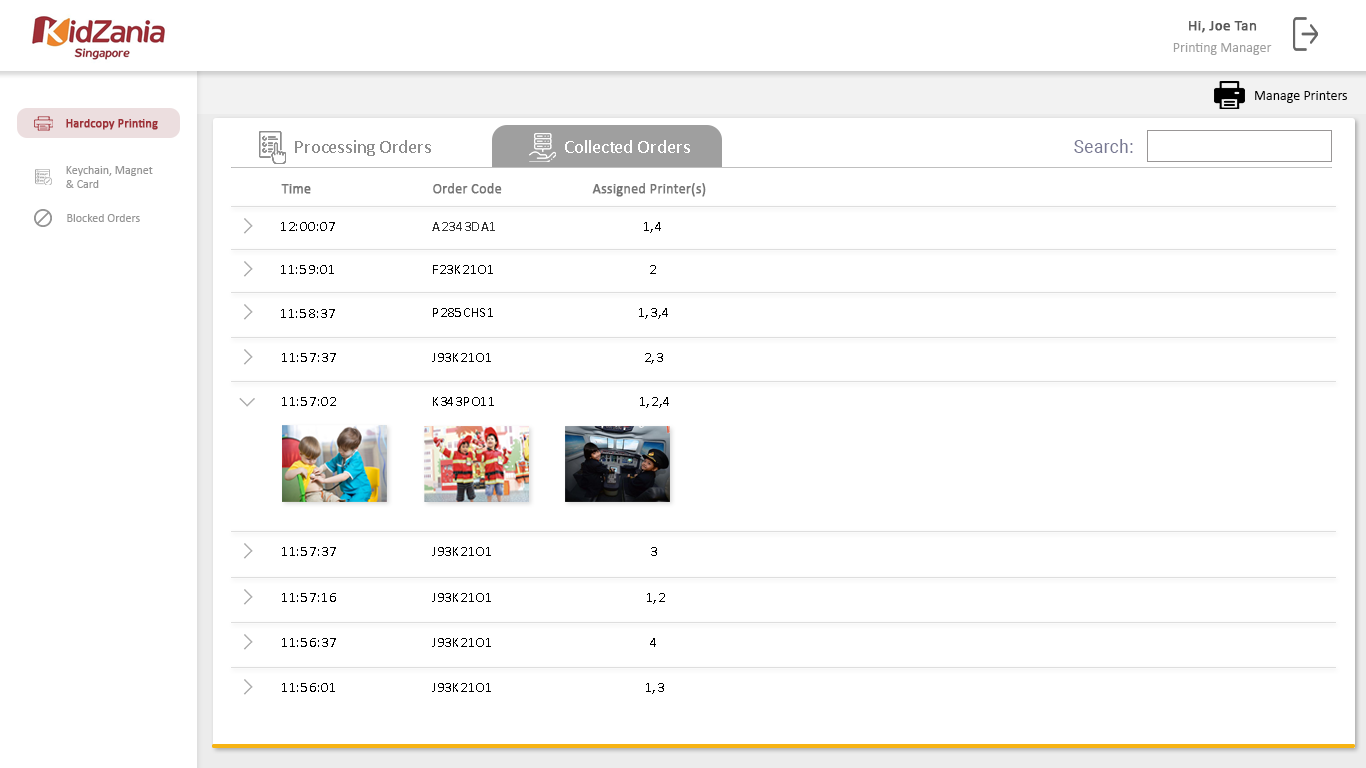
<style>
.page{position:relative;width:1366px;height:768px;background:#ffffff}
.page>*{position:absolute;margin:0}
.t1{font:15px "Calibri";color:#585858;font-weight:bold}
.t2{font:14px "Calibri";color:#9f9f9f}
.t3{font:14px "Calibri";color:#000000}
.t4{font:12px "Calibri";color:#9f3037;font-weight:bold}
.t5{font:19px "Calibri";letter-spacing:-0.01em;color:#8d8d8d}
.t6{font:19px "Calibri";color:#ffffff}
.t7{font:17.5px "Roboto-Regular";letter-spacing:0.017em;color:#787993}
.t8{font:12px/14px "Calibri";color:#959595}
.t9{font:14px "Calibri";color:#757575;font-weight:bold}
.t10{font:12px "Calibri";color:#959595}
.t11{font:14px "Calibri";letter-spacing:0.05em;color:#000000}
.t12{font:13.9px "Calibri";letter-spacing:0.05em;color:#343434}
</style>
<div class="page">
<p class="t1" style="left:1189px;top:21px;width:68px;height:12px">Hi, Joe Tan</p>
<p class="t2" style="left:1173px;top:43px;width:99px;height:12px">Printing Manager</p>
<p class="t3" style="left:1255px;top:91px;width:92px;height:12px">Manage Printers</p>
<p class="t4" style="left:66px;top:119px;width:92px;height:11px">Hardcopy Printing</p>
<p class="t5" style="left:295px;top:140px;width:136px;height:16px">Processing Orders</p>
<p class="t6" style="left:565px;top:140px;width:125px;height:13px">Collected Orders</p>
<p class="t7" style="left:1074px;top:139px;width:59px;height:14px">Search:</p>
<p class="t8" style="left:66px;top:166px;width:87px;height:22px">Keychain, Magnet <br>&amp; Card</p>
<p class="t9" style="left:281px;top:184px;width:30px;height:10px">Time</p>
<p class="t9" style="left:433px;top:183px;width:69px;height:11px">Order Code</p>
<p class="t9" style="left:592px;top:183px;width:114px;height:14px">Assigned Printer(s)</p>
<p class="t10" style="left:67px;top:214px;width:73px;height:8px">Blocked Orders</p>
<p class="t11" style="left:281px;top:222px;width:54px;height:9px">12:00:07</p>
<p class="t12" style="left:432px;top:222px;width:63px;height:9px">A2343DA1</p>
<p class="t11" style="left:644px;top:222px;width:17px;height:11px">1,4</p>
<p class="t11" style="left:281px;top:265px;width:53px;height:9px">11:59:01</p>
<p class="t11" style="left:433px;top:265px;width:60px;height:9px">F23K21O1</p>
<p class="t11" style="left:650px;top:265px;width:6px;height:9px">2</p>
<p class="t11" style="left:281px;top:309px;width:54px;height:9px">11:58:37</p>
<p class="t11" style="left:433px;top:308px;width:60px;height:9px">P285CHS1</p>
<p class="t11" style="left:639px;top:308px;width:29px;height:11px">1,3,4</p>
<p class="t11" style="left:282px;top:353px;width:54px;height:9px">11:57:37</p>
<p class="t11" style="left:432px;top:353px;width:59px;height:9px">J93K21O1</p>
<p class="t11" style="left:645px;top:353px;width:18px;height:11px">2,3</p>
<p class="t11" style="left:282px;top:397px;width:54px;height:9px">11:57:02</p>
<p class="t11" style="left:433px;top:397px;width:61px;height:9px">K343PO11</p>
<p class="t11" style="left:640px;top:397px;width:29px;height:11px">1,2,4</p>
<p class="t11" style="left:282px;top:547px;width:54px;height:9px">11:57:37</p>
<p class="t11" style="left:432px;top:547px;width:59px;height:9px">J93K21O1</p>
<p class="t11" style="left:651px;top:547px;width:6px;height:9px">3</p>
<p class="t11" style="left:282px;top:593px;width:54px;height:9px">11:57:16</p>
<p class="t11" style="left:432px;top:593px;width:59px;height:9px">J93K21O1</p>
<p class="t11" style="left:647px;top:593px;width:18px;height:11px">1,2</p>
<p class="t11" style="left:282px;top:638px;width:54px;height:9px">11:56:37</p>
<p class="t11" style="left:432px;top:638px;width:59px;height:9px">J93K21O1</p>
<p class="t11" style="left:650px;top:638px;width:6px;height:9px">4</p>
<p class="t11" style="left:282px;top:683px;width:53px;height:9px">11:56:01</p>
<p class="t11" style="left:432px;top:683px;width:59px;height:9px">J93K21O1</p>
<p class="t11" style="left:646px;top:683px;width:18px;height:11px">1,3</p>
</div>
